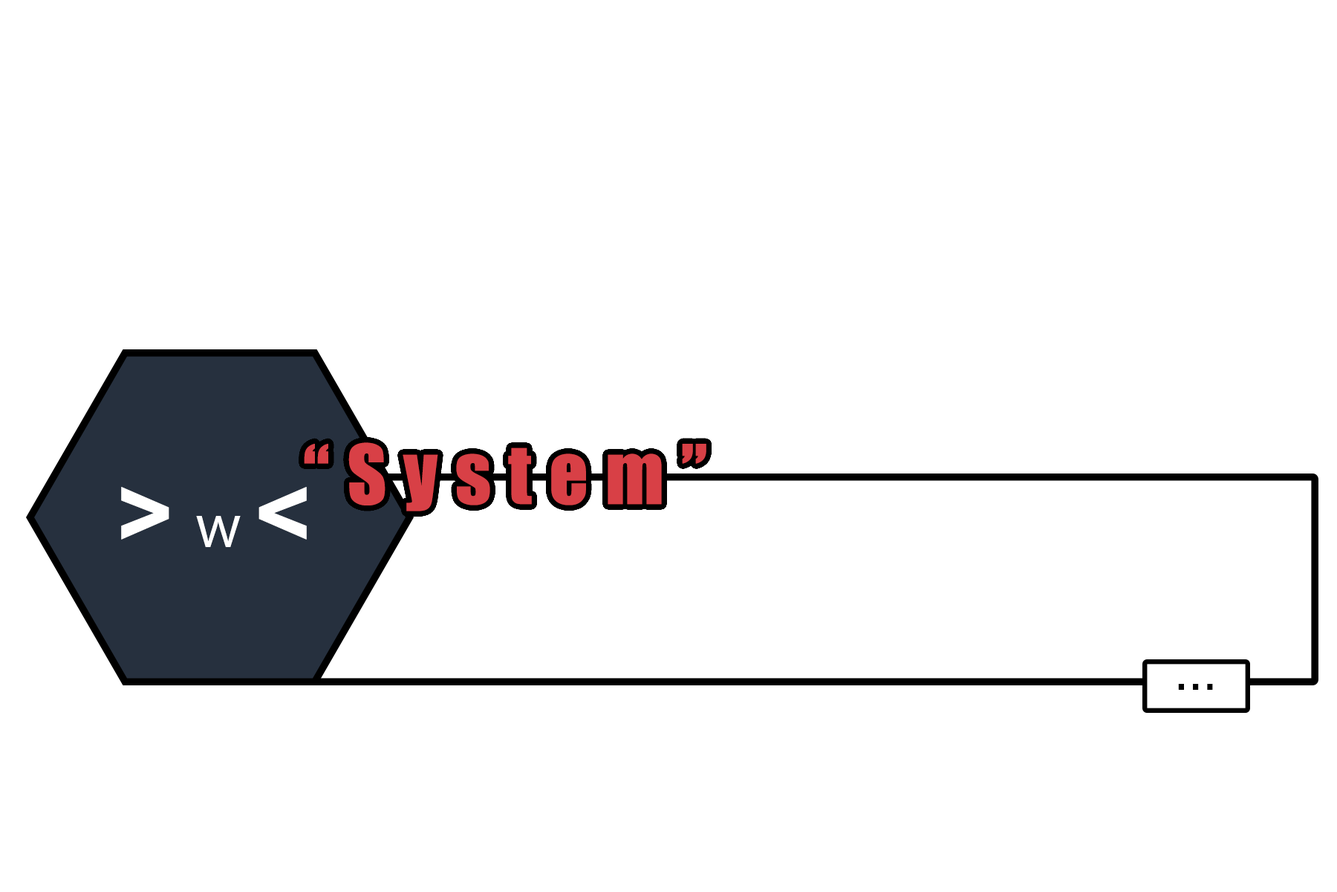
<style>
.page{position:relative;width:1337px;height:892px;background:#ffffff}
.page>*{position:absolute;margin:0}
.t1{font:75.9px "Impact";letter-spacing:0.2em;color:#d84046;font-weight:bold}
.t2{font:95.7px "Arial-BoldMT";letter-spacing:0.2em;color:#ffffff;font-weight:bold}
.t3{font:57px "KozGoPr6N-Regular";letter-spacing:0.2em;color:#ffffff;font-weight:bold}
.t4{font:34.2px "Impact";letter-spacing:0.2em;color:#000000;font-weight:bold}
</style>
<div class="page">
<p class="t1" style="left:304px;top:442px;width:403px;height:69px">“System”</p>
<p class="t2" style="left:121px;top:487px;width:186px;height:60px">&gt;<span class="t3">w</span>&lt;</p>
<p class="t4" style="left:1178px;top:684px;width:35px;height:6px">...</p>
</div>
